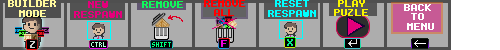
<style>
.page{position:relative;width:500px;height:50px;background:#adadad}
.page>*{position:absolute;margin:0}
.t1{font:8px "Terminal";color:#fff99d;font-weight:bold}
.t2{font:8px "Terminal";color:#e3007b;font-weight:bold}
.t3{font:8px "Terminal";color:#0ff65b;font-weight:bold}
.t4{font:8px "Terminal";color:#ff0000;font-weight:bold}
.t5{font:8px "Terminal";color:#00ffff;font-weight:bold}
.t6{font:8px "Terminal";color:#f8f400;font-weight:bold}
.t7{font:8px "Terminal";color:#ffffff;font-weight:bold}
.t8{font:8px "Terminal";color:#f000dc;font-weight:bold}
.t9{font:8px "Terminal";color:#00f088;font-weight:bold}
.t10{font:6px "Terminal";color:#b1ffdd;font-weight:bold}
.t11{font:6px "Terminal";color:#00ff84;font-weight:bold}
</style>
<div class="page">
<p class="t1" style="left:8px;top:0px;width:48px;height:17px;text-align:center">BUILDER MODE</p>
<p class="t2" style="left:74px;top:1px;width:48px;height:17px;text-align:center">NEW <br>RESPAWN</p>
<p class="t3" style="left:142px;top:1px;width:41px;height:7px">REMOVE</p>
<p class="t4" style="left:204px;top:0px;width:41px;height:16px;text-align:center">REMOVE ALL</p>
<p class="t5" style="left:268px;top:0px;width:48px;height:17px;text-align:center">RESET RESPAWN</p>
<p class="t6" style="left:334px;top:0px;width:34px;height:16px;text-align:center">PLAY  PUZLE</p>
<p class="t7" style="left:404px;top:4px;width:30px;height:26px;text-align:center">BACK <br>TO <br>MENU</p>
<p class="t8" style="left:221px;top:40px;width:6px;height:7px">F</p>
<p class="t9" style="left:287px;top:39px;width:6px;height:7px">X</p>
<p class="t10" style="left:91px;top:42px;width:15px;height:5px">CTRL</p>
<p class="t11" style="left:152px;top:42px;width:19px;height:5px">SHIFT</p>
</div>
